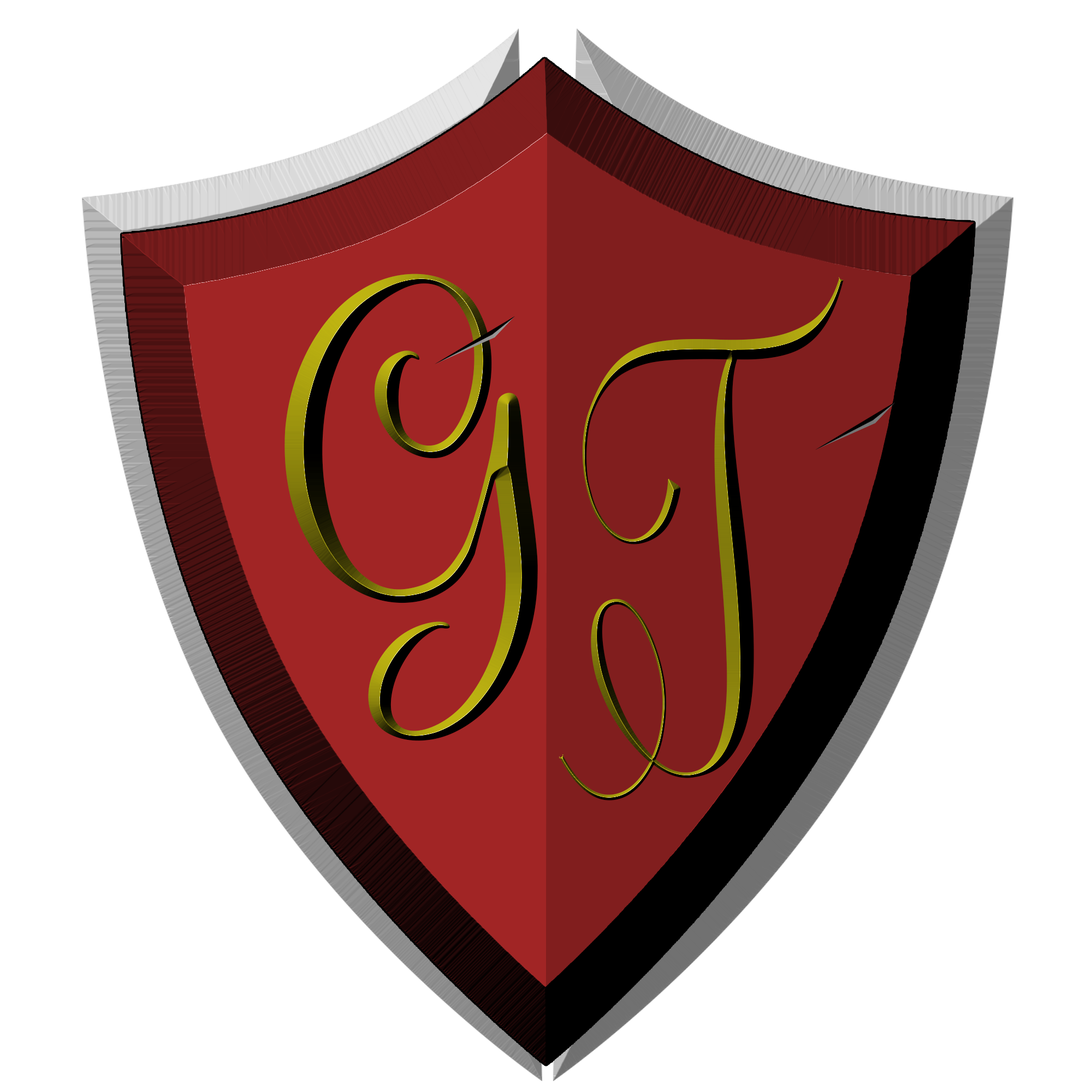
<style>
.page{position:relative;width:1092px;height:1092px;background:#ffffff}
.page>*{position:absolute;margin:0}
.t1{font:398.8px "Le-chant-des-Albatros";scale:0.84 1}
.t2{font:459.3px "StayolaPERSONALUSE-Regular";scale:0.65 1}
</style>
<div class="page">
<p class="t1" style="left:284px;top:274px;width:254px;height:467px;rotate:-27deg">G</p>
<p class="t2" style="left:559px;top:277px;width:285px;height:523px;rotate:-18deg">T</p>
</div>
